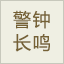
<style>
.page{position:relative;width:64px;height:64px;background:#efefe3}
.page>*{position:absolute;margin:0}
.t1{font:18px "MicrosoftYaHei";letter-spacing:0.1em;color:#756135}
</style>
<div class="page">
<p class="t1" style="left:13px;top:10px;width:37px;height:42px">警钟<br>长鸣</p>
</div>
